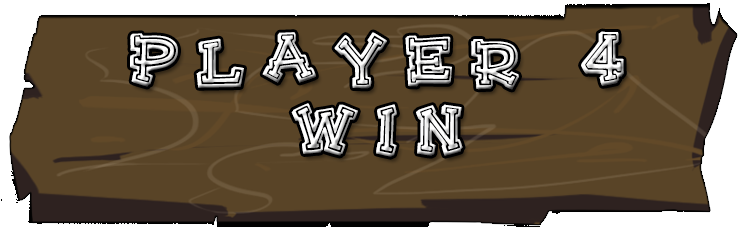
<style>
.page{position:relative;width:738px;height:230px;background:#594427}
.page>*{position:absolute;margin:0}
.t1{font:72px/14px "HeeHaw-Regular";letter-spacing:0.2em;color:#ffffff}
</style>
<div class="page">
<p class="t1" style="left:130px;top:31px;width:494px;height:126px;text-align:center">Player 4<br><br><br><br><br>WIN</p>
</div>
